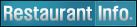
<style>
.page{position:relative;width:137px;height:27px}
.page>*{position:absolute;margin:0}
.t1{font:17px "H2hdrM"}
</style>
<div class="page">
<p class="t1" style="left:4px;top:5px;width:129px;height:16px">Restaurant Info.</p>
</div>
